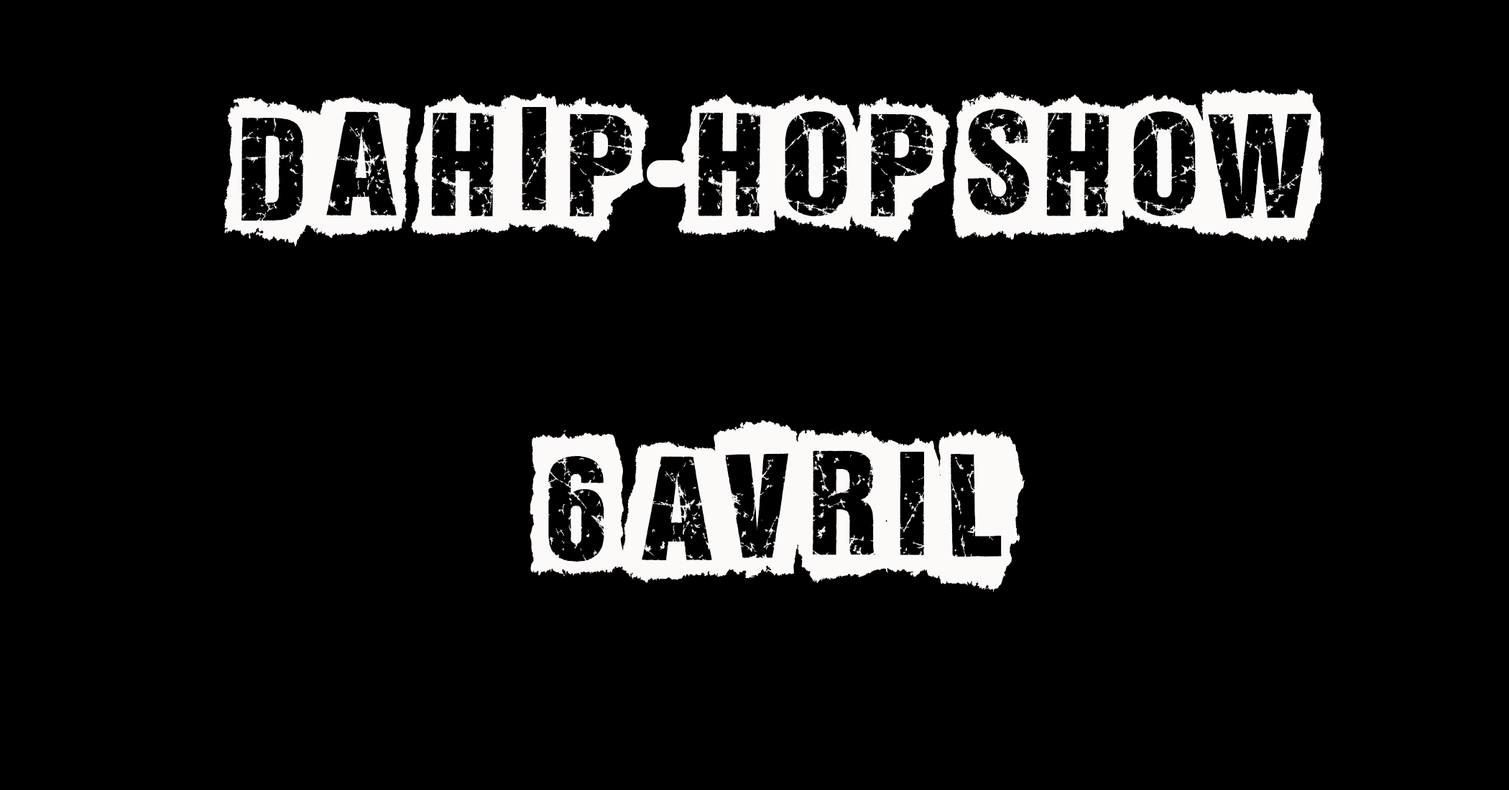
<style>
.page{position:relative;width:1509px;height:790px;background:#000000}
.page>*{position:absolute;margin:0}
.t1{font:143.7px "ALLAGESDEMO";color:#fcf9f9}
.t2{font:143.7px "Billo";color:#fcf9f9}
</style>
<div class="page">
<p class="t1" style="left:224px;top:88px;width:1100px;height:505px;text-align:center">DA HIP<span class="t2">-</span>HOP SHOW<br><br>6 AVRIL</p>
</div>
